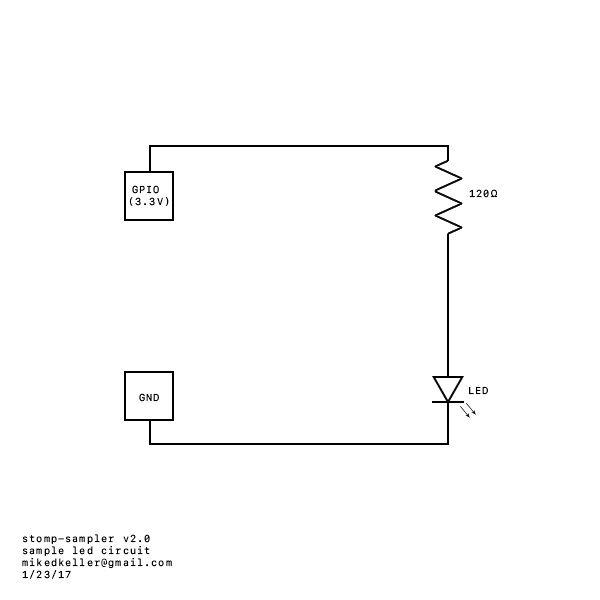
<style>
.page{position:relative;width:600px;height:600px;background:#ffffff}
.page>*{position:absolute;margin:0}
.t1{font:10px "SFMono-Regular";letter-spacing:0.1em;color:#000000}
</style>
<div class="page">
<p class="t1" style="left:129px;top:185px;width:40px;height:21px;text-align:center">GPIO <br>(3.3V)</p>
<p class="t1" style="left:469px;top:189px;width:29px;height:9px">120Ω</p>
<p class="t1" style="left:469px;top:386px;width:19px;height:9px">LED</p>
<p class="t1" style="left:139px;top:393px;width:20px;height:9px">GND</p>
<p class="t1" style="left:22px;top:534px;width:150px;height:45px">stomp-sampler v2.0<br>sample led circuit<br>mikedkeller@gmail.com<br>1/23/17</p>
</div>
